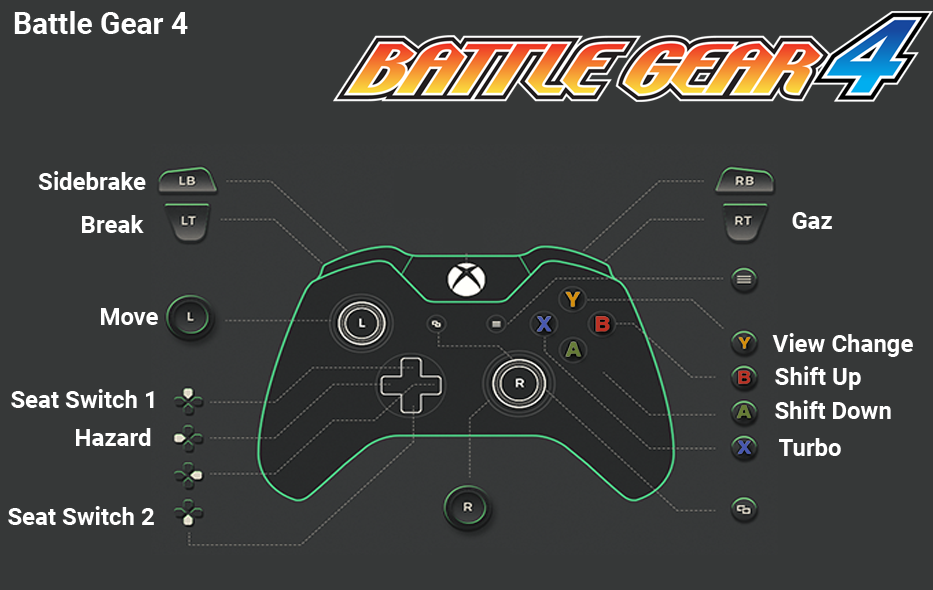
<style>
.page{position:relative;width:933px;height:590px;background:#363838}
.page>*{position:absolute;margin:0}
.t1{font:30px "Roboto-Bold";color:#ffffff}
.t2{font:24px "Roboto-Bold";color:#ffffff}
</style>
<div class="page">
<p class="t1" style="left:14px;top:11px;width:174px;height:23px">Battle Gear 4</p>
<p class="t2" style="left:38px;top:171px;width:108px;height:19px">Sidebrake</p>
<p class="t2" style="left:82px;top:215px;width:62px;height:18px">Break</p>
<p class="t2" style="left:792px;top:212px;width:40px;height:17px">Gaz</p>
<p class="t2" style="left:101px;top:308px;width:57px;height:17px">Move</p>
<p class="t2" style="left:772px;top:333px;width:141px;height:24px">View Change</p>
<p class="t2" style="left:775px;top:366px;width:86px;height:24px">Shift Up</p>
<p class="t2" style="left:11px;top:389px;width:143px;height:19px">Seat Switch 1</p>
<p class="t2" style="left:775px;top:400px;width:116px;height:19px">Shift Down</p>
<p class="t2" style="left:76px;top:428px;width:75px;height:18px">Hazard</p>
<p class="t2" style="left:779px;top:438px;width:62px;height:18px">Turbo</p>
<p class="t2" style="left:8px;top:506px;width:146px;height:19px">Seat Switch 2</p>
</div>
